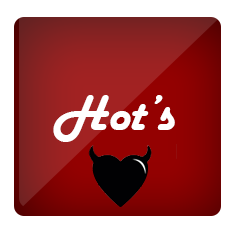
<style>
.page{position:relative;width:244px;height:232px;background:#ffffff}
.page>*{position:absolute;margin:0}
.t1{font:52.1px "HarlowSolid";color:#ffffff}
</style>
<div class="page">
<p class="t1" style="left:53px;top:95px;width:122px;height:47px">Hot’s</p>
</div>
